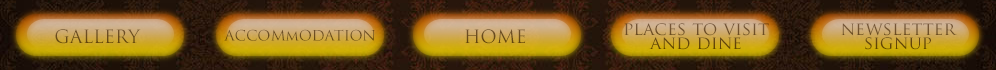
<style>
.page{position:relative;width:996px;height:70px}
.page>*{position:absolute;margin:0}
.t1{font:18px "TrajanPro-Regular";color:#694a19}
.t2{font:14.1px "TrajanPro-Regular";color:#6b4b1e}
.t3{font:18px "TrajanPro-Regular";color:#6a4b1c}
.t4{font:18px/14px "TrajanPro-Regular"}
.t5{font:18px/14px "TrajanPro-Regular";color:#674917}
</style>
<div class="page">
<p class="t1" style="left:55px;top:29px;width:86px;height:15px">GALLERY</p>
<p class="t2" style="left:224px;top:29px;width:151px;height:12px">ACCOMmODATION</p>
<p class="t3" style="left:465px;top:29px;width:61px;height:15px">HOME</p>
<p class="t4" style="left:624px;top:23px;width:145px;height:27px;text-align:center">places to visit<br>and dine</p>
<p class="t5" style="left:841px;top:23px;width:116px;height:27px;text-align:center">newsletter<br>signup</p>
</div>
